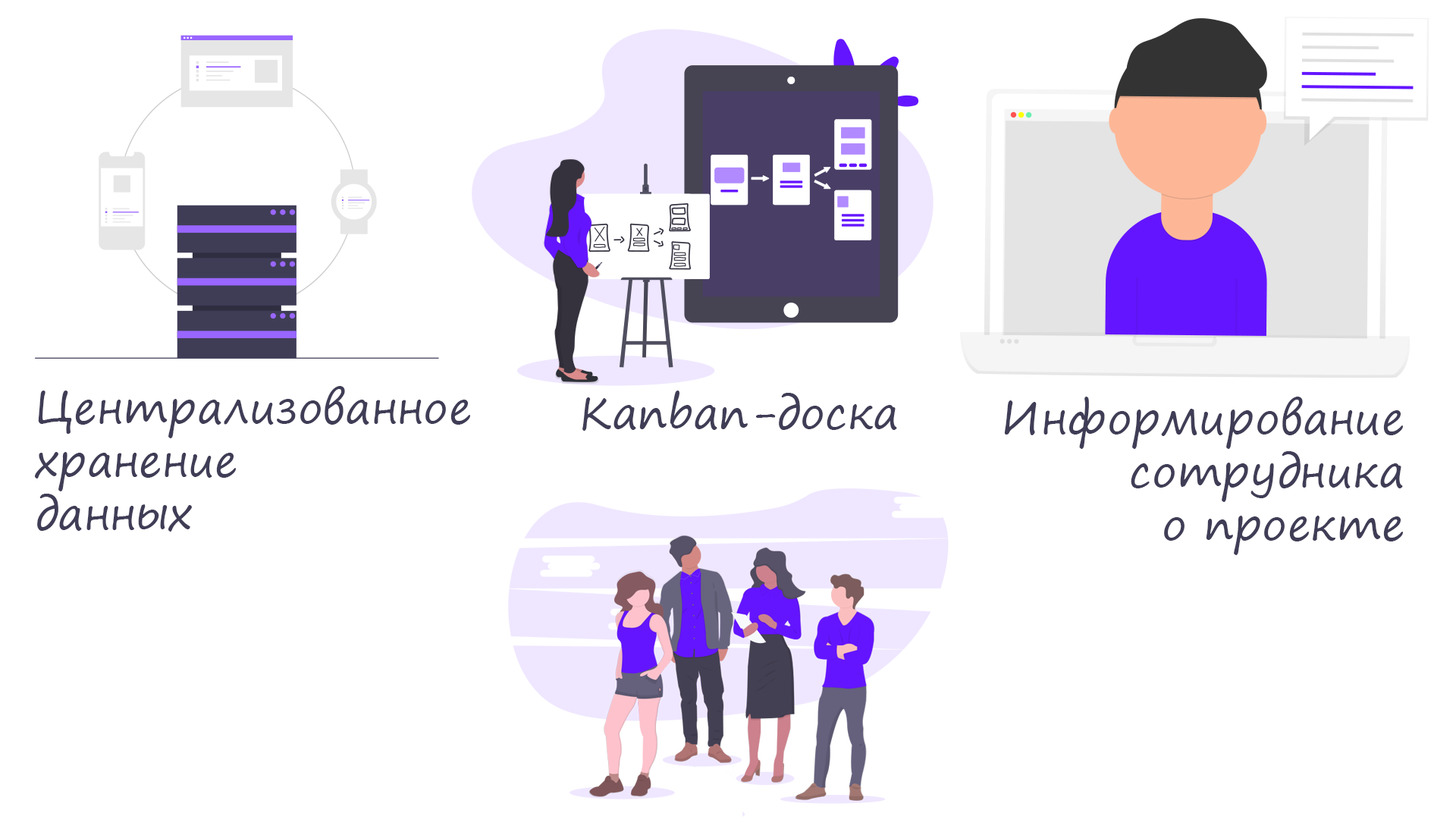
<style>
.page{position:relative;width:1456px;height:819px;background:#ffffff}
.page>*{position:absolute;margin:0}
.t1{font:44.2px "SegoePrint";color:#3f3d56}
</style>
<div class="page">
<p class="t1" style="left:35px;top:386px;width:435px;height:146px">Централизованное <br>хранение <br>данных</p>
<p class="t1" style="left:582px;top:391px;width:315px;height:40px">Kanban-доска</p>
<p class="t1" style="left:1004px;top:397px;width:399px;height:158px;text-align:right">Информирование<br>сотрудника<br>о проекте</p>
</div>
